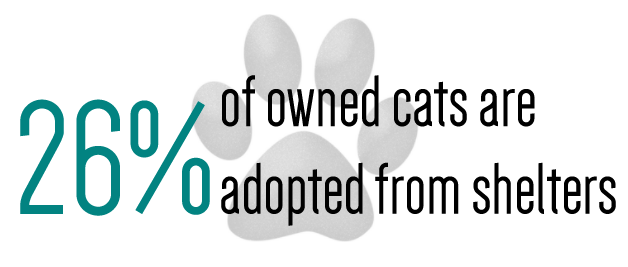
<style>
.page{position:relative;width:628px;height:267px;background:#ffffff}
.page>*{position:absolute;margin:0}
.t1{font:75px/87.5px "Dense-Regular";color:#000000}
.t2{font:166.7px "Dense-Regular";color:#028482}
</style>
<div class="page">
<p class="t1" style="left:221px;top:75px;width:395px;height:151px">of owned cats are<br>adopted from shelters</p>
<p class="t2" style="left:20px;top:99px;width:190px;height:117px">26%</p>
</div>
